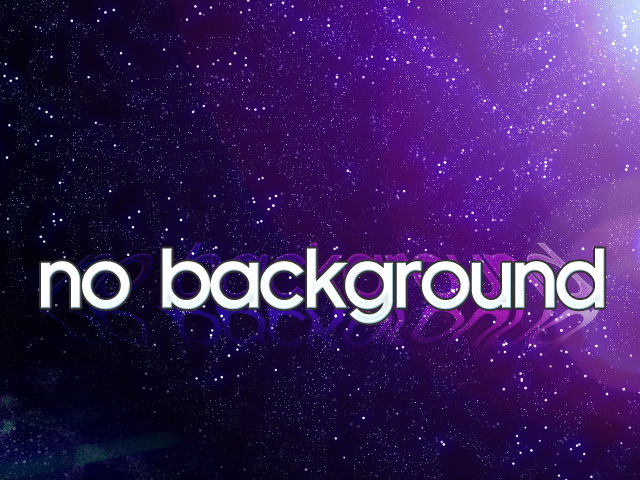
<style>
.page{position:relative;width:640px;height:480px}
.page>*{position:absolute;margin:0}
.t1{font:82px "Florencesans-Bold";letter-spacing:-0.075em;color:#ffffff}
</style>
<div class="page">
<p class="t1" style="left:41px;top:248px;width:564px;height:76px">no background</p>
</div>
